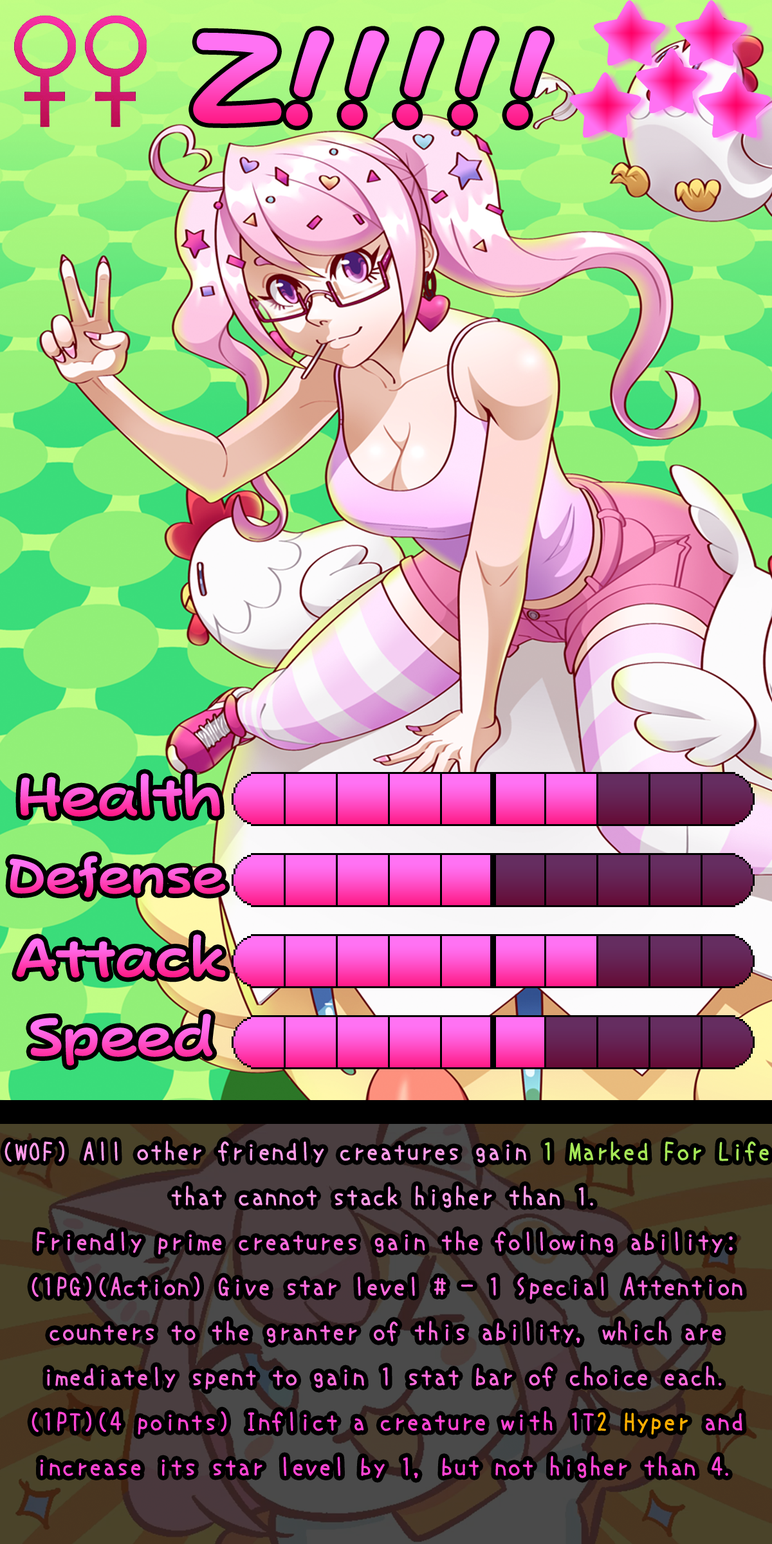
<style>
.page{position:relative;width:772px;height:1544px}
.page>*{position:absolute;margin:0}
.t1{font:225.2px "PopJoyStd-B"}
.t2{font:92.7px "PopJoyStd-B"}
.t3{font:83.6px "PopJoyStd-B"}
.t4{font:27px/45px "uzura_font";color:#ff6adc}
.t5{font:27px/45px "uzura_font";color:#ff9be8}
.t6{font:27px/45px "uzura_font";color:#a5e856}
.t7{font:27px/45px "uzura_font";color:#ff9ae7}
.t8{font:27px/45px "uzura_font";color:#ff44d3}
.t9{font:27px/45px "uzura_font";color:#ffae00}
</style>
<div class="page">
<p class="t1" style="left:193px;top:30px;width:357px;height:96px">Z!!!!!</p>
<p class="t2" style="left:20px;top:773px;width:200px;height:44px">Health</p>
<p class="t3" style="left:10px;top:856px;width:216px;height:42px">Defense</p>
<p class="t2" style="left:16px;top:934px;width:210px;height:44px">Attack</p>
<p class="t2" style="left:30px;top:1013px;width:183px;height:53px">Speed</p>
<p class="t4" style="left:5px;top:1141px;width:764px;height:338px;text-align:center"><span class="t5">(WOF) All other friendly creatures gain </span><span class="t6">1 Marked For Life</span><span class="t7"> that cannot stack higher than 1.<br></span>Friendly prime creatures gain the following ability:<br>(1PG)(Action) Give star level # - 1 Special Attention counters to the granter of this ability, which are imediately spent to gain 1 stat bar of choice each.<br><span class="t8">(1PT)(4 points) Inflict a creature with 1T</span><span class="t9">2 Hyper</span><span class="t8"> and increase its star level by 1, but not higher than 4.</span></p>
</div>
